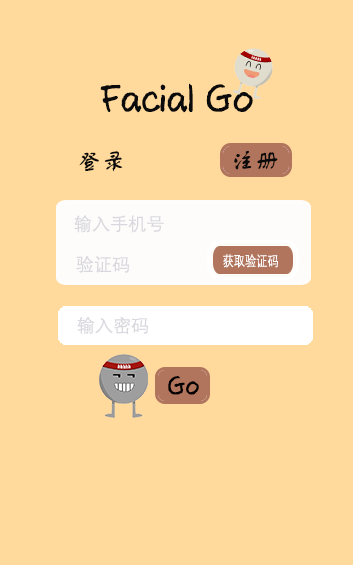
<style>
.page{position:relative;width:353px;height:565px;background:#ffda9c}
.page>*{position:absolute;margin:0}
.t1{font:36px "AxureHandwriting";color:#0c0b0b}
.t2{font:24px "FZSTK--GBK1-0";color:#0c0b0b}
.t3{font:18.1px "DengXian-Regular";color:#d9d8de}
.t4{font:18px "DengXian-Regular";color:#d9d8de}
.t5{font:14px "DengXian-Regular";color:#ffffff;scale:0.8 1}
.t6{font:24px "AxureHandwriting";color:#000000}
</style>
<div class="page">
<p class="t1" style="left:100px;top:83px;width:153px;height:30px">Facial Go</p>
<p class="t2" style="left:79px;top:151px;width:44px;height:21px">登录</p>
<p class="t2" style="left:234px;top:151px;width:44px;height:19px">注册</p>
<p class="t3" style="left:74px;top:215px;width:90px;height:18px">输入手机号</p>
<p class="t4" style="left:76px;top:256px;width:53px;height:17px">验证码</p>
<p class="t5" style="left:223px;top:254px;width:55px;height:14px">获取验证码</p>
<p class="t4" style="left:77px;top:316px;width:71px;height:18px">输入密码</p>
<p class="t6" style="left:168px;top:376px;width:31px;height:19px">Go</p>
</div>
